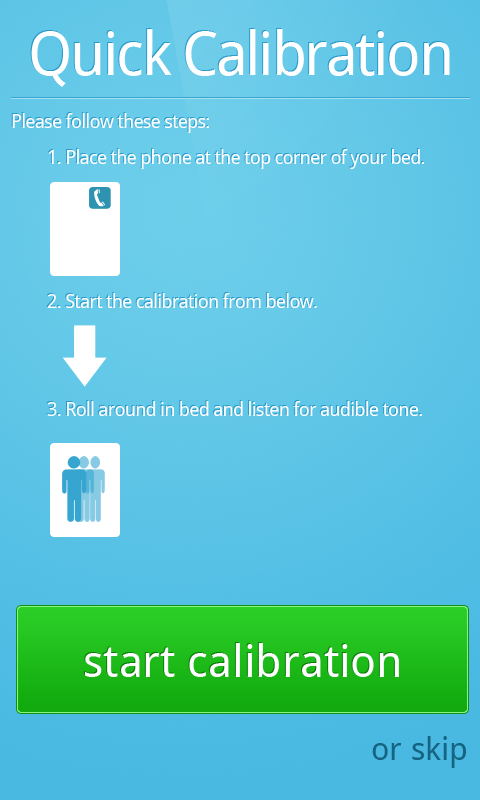
<style>
.page{position:relative;width:480px;height:800px}
.page>*{position:absolute;margin:0}
.t1{font:60px "DroidSans";letter-spacing:-0.04em;color:#ffffff}
.t2{font:19px/36px "DroidSans";letter-spacing:-0.04em;color:#ffffff}
.t3{font:45px "DroidSans";color:#ffffff}
.t4{font:32px "DroidSans";color:#146482}
</style>
<div class="page">
<p class="t1" style="left:31px;top:29px;width:419px;height:58px">Quick Calibration</p>
<p class="t2" style="left:12px;top:113px;width:413px;height:303px">Please follow these steps:<br> 1. Place the phone at the top corner of your bed.<br><br><br><br> 2. Start the calibration from below.<br><br><br> 3. Roll around in bed and listen for audible tone.</p>
<p class="t3" style="left:85px;top:643px;width:314px;height:34px">start calibration</p>
<p class="t4" style="left:372px;top:736px;width:94px;height:32px">or skip</p>
</div>
